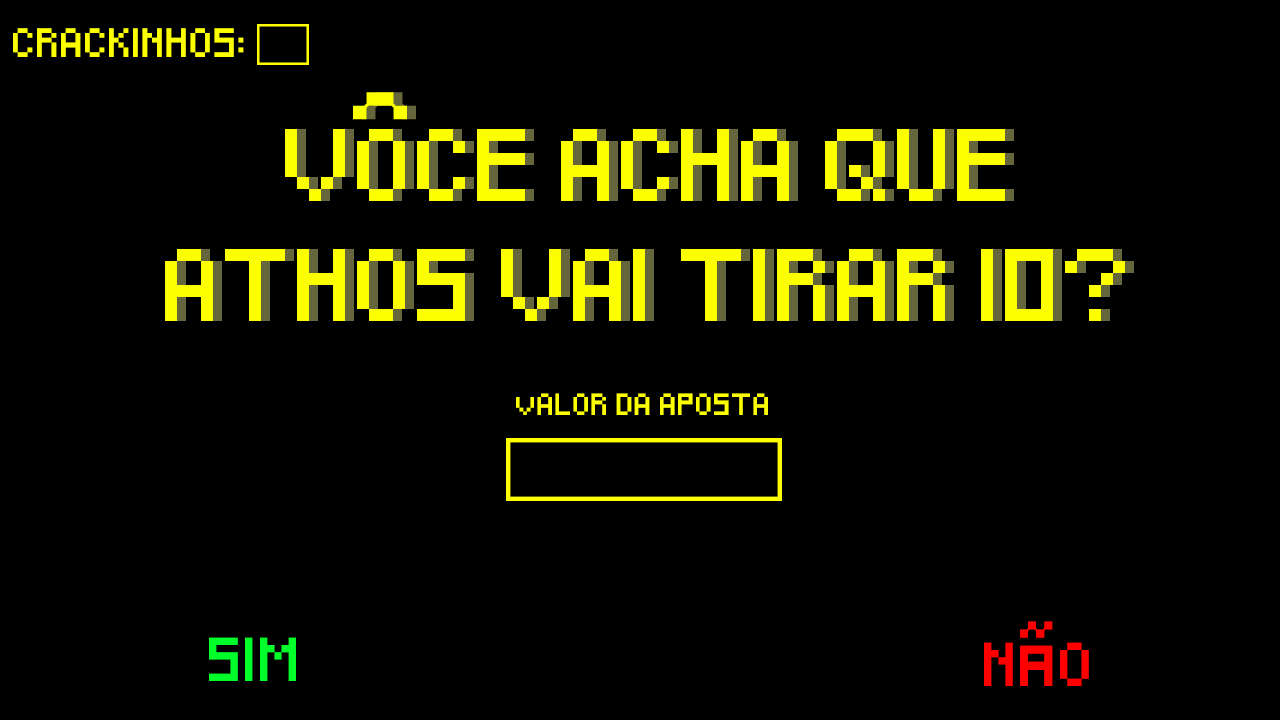
<style>
.page{position:relative;width:1280px;height:720px;background:#000000}
.page>*{position:absolute;margin:0}
.t1{font:24px "Pixeled";color:#fcff00}
.t2{font:60px/120px "Pixeled";color:#fcff00}
.t3{font:60px/120px "Pixeled"}
.t4{font:18px "Pixeled";color:#fcff00}
.t5{font:36px "Pixeled";color:#ff0000}
.t6{font:55px "Symtext";color:#ff0000}
.t7{font:36px "Pixeled";color:#00ff2a}
</style>
<div class="page">
<p class="t1" style="left:13px;top:28px;width:231px;height:29px">CRACKINHOS:</p>
<p class="t2" style="left:165px;top:129px;width:960px;height:192px;text-align:center">VOCE ACHA QUE ATHOS VAI TIRAR 10?</p>
<p class="t3" style="left:174px;top:129px;width:960px;height:192px;text-align:center">VOCE ACHA QUE ATHOS VAI TIRAR 10?</p>
<p class="t4" style="left:516px;top:393px;width:252px;height:22px">vALOR DA APOSTA</p>
<p class="t5" style="left:984px;top:621px;width:105px;height:65px">N<span class="t6">Ã</span>O</p>
<p class="t7" style="left:209px;top:637px;width:87px;height:44px">SIM</p>
</div>
